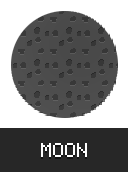
<style>
.page{position:relative;width:128px;height:172px;background:#ffffff}
.page>*{position:absolute;margin:0}
.t1{font:15.9px "pixelmix"}
.t2{font:15.9px "pixelmix";color:#ffffff}
</style>
<div class="page">
<p class="t1" style="left:41px;top:145px;width:46px;height:14px">MOON</p>
<p class="t2" style="left:41px;top:143px;width:46px;height:14px">MOON</p>
</div>
